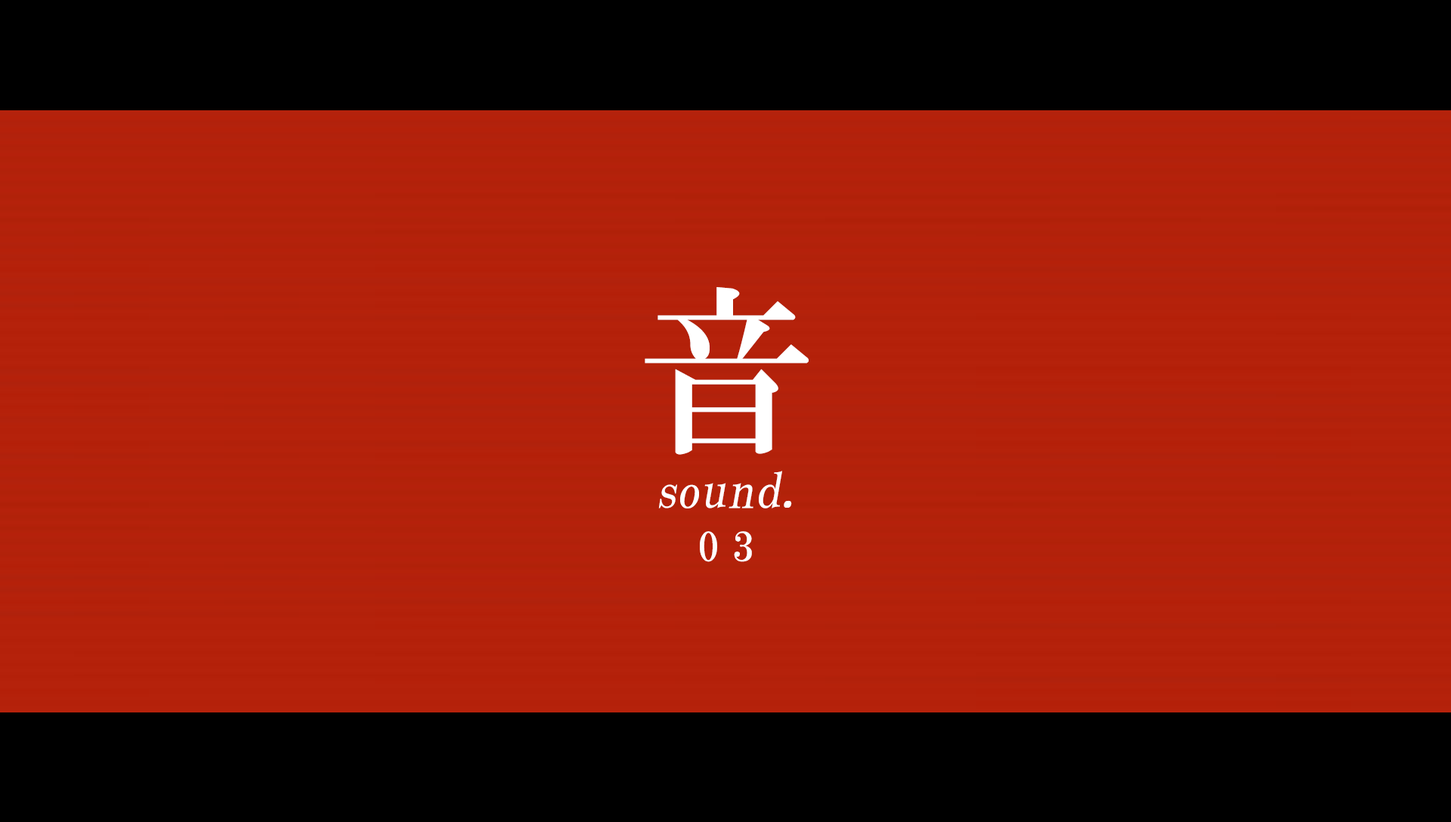
<style>
.page{position:relative;width:1451px;height:822px;background:#000000}
.page>*{position:absolute;margin:0}
.t1{font:181.3px "HGMinchoB";letter-spacing:0.65em;color:#ffffff}
.t2{font:48.4px "HGPMinchoB";letter-spacing:0.01em;color:#ffffff;font-style:italic}
.t3{font:40.8px "HGMinchoB";letter-spacing:0.35em;color:#ffffff}
</style>
<div class="page">
<p class="t1" style="left:644px;top:287px;width:164px;height:168px">音</p>
<p class="t2" style="left:658px;top:471px;width:134px;height:37px">sound.</p>
<p class="t3" style="left:700px;top:531px;width:52px;height:31px">03</p>
</div>
